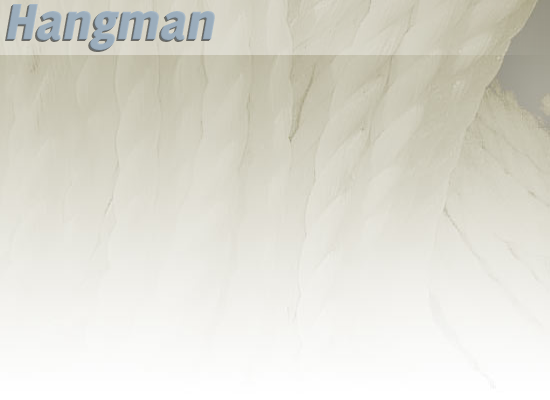
<style>
.page{position:relative;width:550px;height:400px}
.page>*{position:absolute;margin:0}
.t1{font:56px "Delicious-Heavy";color:#9badbc;font-style:italic}
</style>
<div class="page">
<p class="t1" style="left:6px;top:5px;width:208px;height:46px">Hangman</p>
<p class="t1" style="left:7px;top:4px;width:208px;height:46px">Hangman</p>
</div>
